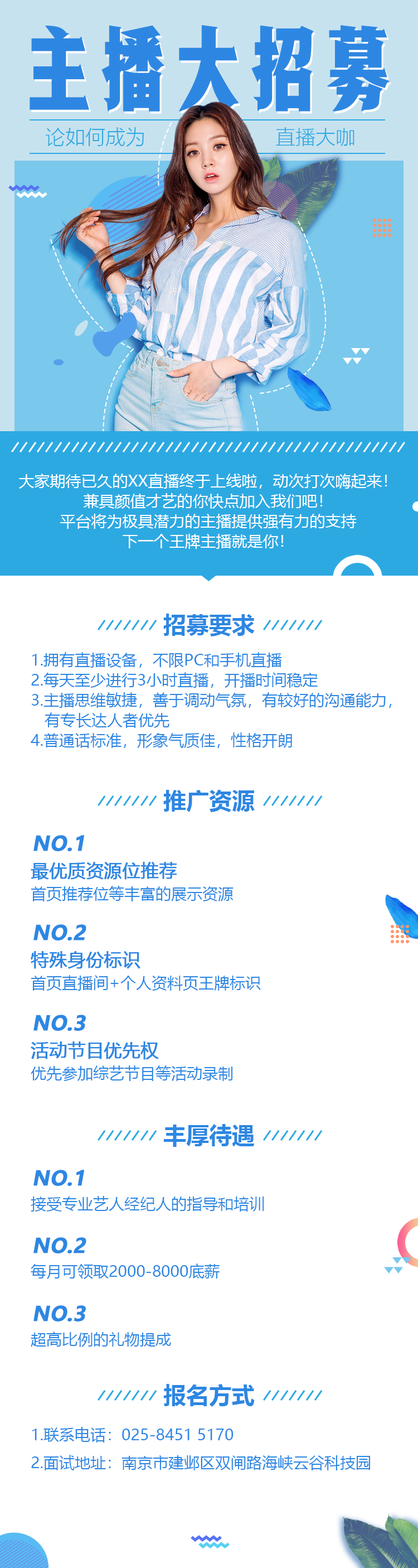
<style>
.page{position:relative;width:418px;height:1568px;background:#ffffff}
.page>*{position:absolute;margin:0}
.t1{font:88.4px "REEJI-PengPaiGB-Regular";color:#2d87e2;font-weight:bold}
.t2{font:20.1px "MicrosoftYaHeiUILight";color:#2da9e2}
.t3{font:15.6px/20.1px "MicrosoftYaHeiUI";color:#ffffff}
.t4{font:23px "MicrosoftYaHeiUI-Bold";color:#2d87e2}
.t5{font:15.6px/20.1px "MicrosoftYaHeiUI";color:#2d87e2}
.t6{font:20.1px "MicrosoftYaHeiUI-Bold";color:#2d87e2;font-weight:bold;font-style:italic}
.t7{font:17.8px "MicrosoftYaHeiUI";color:#2d87e2;font-weight:bold}
.t8{font:15.6px "MicrosoftYaHeiUI";color:#2d87e2}
</style>
<div class="page">
<p class="t1" style="left:30px;top:25px;width:360px;height:87px">主播大招募</p>
<p class="t1" style="left:31px;top:27px;width:361px;height:87px">主播大招募</p>
<p class="t2" style="left:45px;top:127px;width:99px;height:20px">论如何成为</p>
<p class="t2" style="left:276px;top:127px;width:79px;height:19px">直播大咖</p>
<p class="t3" style="left:18px;top:473px;width:370px;height:76px;text-align:center">大家期待已久的XX直播终于上线啦，动次打次嗨起来！<br>兼具颜值才艺的你快点加入我们吧！<br>平台将为极具潜力的主播提供强有力的支持<br>下一个王牌主播就是你！</p>
<p class="t4" style="left:163px;top:614px;width:92px;height:22px">招募要求</p>
<p class="t5" style="left:31px;top:652px;width:361px;height:96px">1.拥有直播设备，不限PC和手机直播<br>2.每天至少进行3小时直播，开播时间稳定<br>3.主播思维敏捷，善于调动气氛，有较好的沟通能力，<br>   有专长达人者优先<br>4.普通话标准，形象气质佳，性格开朗</p>
<p class="t4" style="left:163px;top:790px;width:92px;height:22px">推广资源</p>
<p class="t6" style="left:33px;top:835px;width:52px;height:16px">NO.1</p>
<p class="t7" style="left:31px;top:862px;width:146px;height:18px">最优质资源位推荐</p>
<p class="t8" style="left:31px;top:886px;width:203px;height:15px">首页推荐位等丰富的展示资源</p>
<p class="t6" style="left:33px;top:924px;width:53px;height:16px">NO.2</p>
<p class="t7" style="left:31px;top:951px;width:110px;height:18px">特殊身份标识</p>
<p class="t8" style="left:31px;top:975px;width:230px;height:16px">首页直播间+个人资料页王牌标识</p>
<p class="t6" style="left:33px;top:1015px;width:53px;height:16px">NO.3</p>
<p class="t7" style="left:31px;top:1041px;width:128px;height:19px">活动节目优先权</p>
<p class="t8" style="left:31px;top:1065px;width:202px;height:16px">优先参加综艺节目等活动录制</p>
<p class="t4" style="left:163px;top:1124px;width:92px;height:23px">丰厚待遇</p>
<p class="t6" style="left:33px;top:1170px;width:52px;height:16px">NO.1</p>
<p class="t8" style="left:31px;top:1196px;width:233px;height:16px">接受专业艺人经纪人的指导和培训</p>
<p class="t6" style="left:33px;top:1237px;width:53px;height:16px">NO.2</p>
<p class="t8" style="left:31px;top:1263px;width:189px;height:16px">每月可领取2000-8000底薪</p>
<p class="t6" style="left:33px;top:1305px;width:53px;height:16px">NO.3</p>
<p class="t8" style="left:31px;top:1331px;width:140px;height:16px">超高比例的礼物提成</p>
<p class="t4" style="left:163px;top:1384px;width:92px;height:23px">报名方式</p>
<p class="t8" style="left:32px;top:1427px;width:202px;height:15px">1.联系电话：025-8451 5170</p>
<p class="t8" style="left:31px;top:1455px;width:339px;height:15px">2.面试地址：南京市建邺区双闸路海峡云谷科技园</p>
</div>
